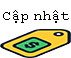
<style>
.page{position:relative;width:71px;height:58px;background:#ffffff}
.page>*{position:absolute;margin:0}
.t1{font:15px "CourierNewPSMT";color:#000000}
</style>
<div class="page">
<p class="t1" style="left:3px;top:10px;width:66px;height:13px">Cập nhật</p>
</div>
